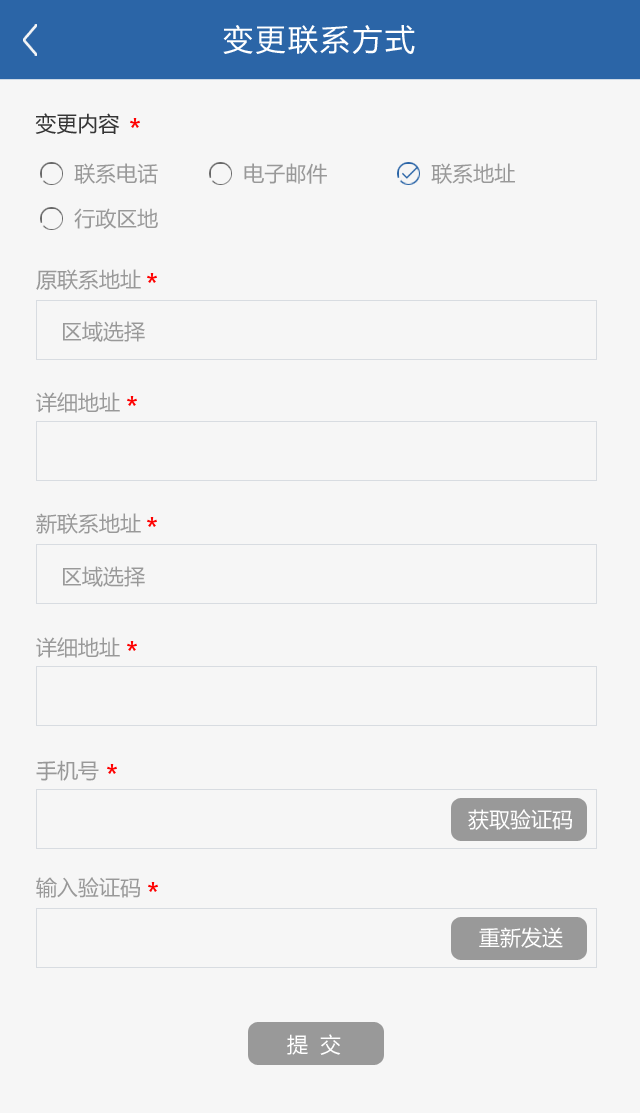
<style>
.page{position:relative;width:640px;height:1113px;background:#f6f6f6}
.page>*{position:absolute;margin:0}
.t1{font:30px "MicrosoftYaHei";letter-spacing:0.08em;color:#ffffff}
.t2{font:21px "MicrosoftYaHei";color:#353535}
.t3{font:21px "MicrosoftYaHei";color:#999999}
.t4{font:21px "MicrosoftYaHei";color:#ffffff}
.t5{font:21px "MicrosoftYaHei";letter-spacing:0.14em;color:#ffffff}
</style>
<div class="page">
<p class="t1" style="left:223px;top:25px;width:192px;height:29px">变更联系方式</p>
<p class="t2" style="left:35px;top:113px;width:85px;height:21px">变更内容</p>
<p class="t3" style="left:74px;top:163px;width:84px;height:21px">联系电话</p>
<p class="t3" style="left:244px;top:163px;width:83px;height:21px">电子邮件</p>
<p class="t3" style="left:431px;top:163px;width:84px;height:21px">联系地址</p>
<p class="t3" style="left:74px;top:208px;width:84px;height:21px">行政区地</p>
<p class="t3" style="left:36px;top:269px;width:105px;height:21px">原联系地址</p>
<p class="t3" style="left:63px;top:321px;width:82px;height:21px">区域选择</p>
<p class="t3" style="left:36px;top:392px;width:84px;height:21px">详细地址</p>
<p class="t3" style="left:36px;top:513px;width:105px;height:21px">新联系地址</p>
<p class="t3" style="left:63px;top:566px;width:82px;height:21px">区域选择</p>
<p class="t3" style="left:36px;top:637px;width:84px;height:21px">详细地址</p>
<p class="t3" style="left:36px;top:760px;width:63px;height:21px">手机号</p>
<p class="t4" style="left:468px;top:809px;width:104px;height:21px">获取验证码</p>
<p class="t3" style="left:36px;top:877px;width:104px;height:21px">输入验证码</p>
<p class="t4" style="left:479px;top:927px;width:84px;height:21px">重新发送</p>
<p class="t5" style="left:287px;top:1034px;width:54px;height:21px">提 交</p>
</div>
